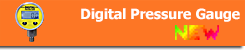
<style>
.page{position:relative;width:250px;height:50px;background:#fd7625}
.page>*{position:absolute;margin:0}
.t1{font:14px "Tahoma-Bold";color:#ffffff}
</style>
<div class="page">
<p class="t1" style="left:81px;top:8px;width:159px;height:14px">Digital Pressure Gauge</p>
</div>
